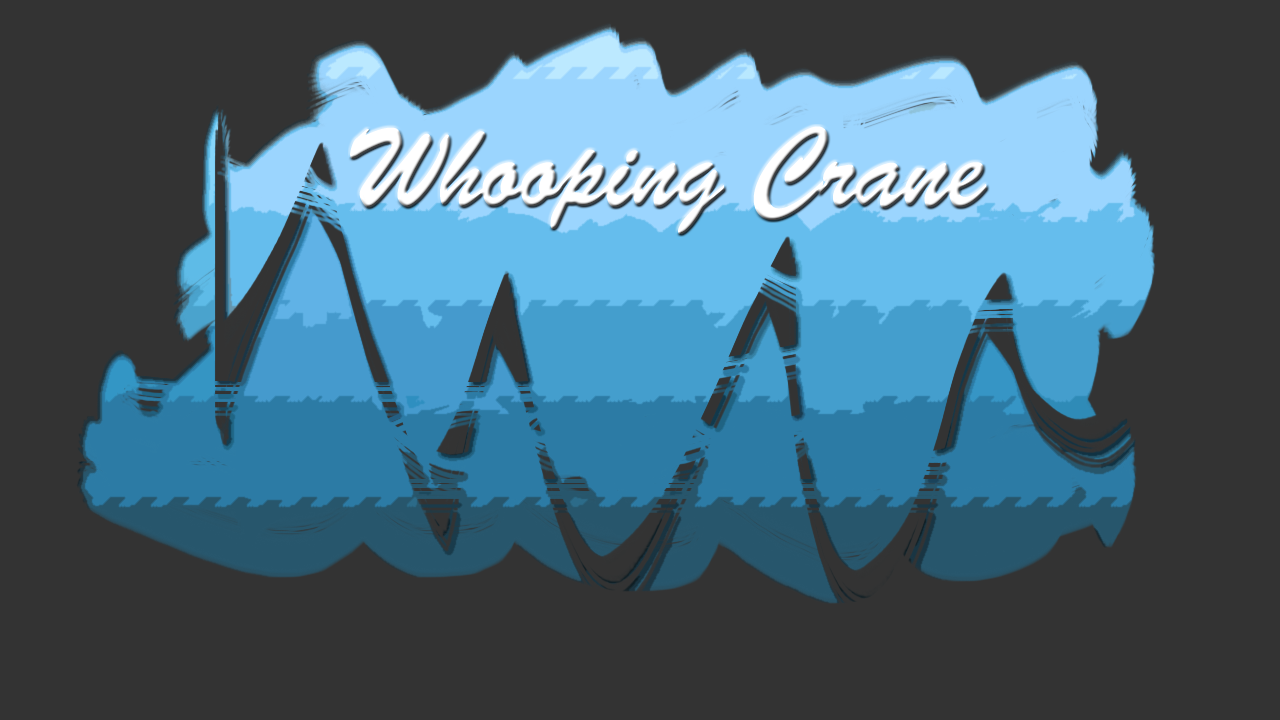
<style>
.page{position:relative;width:1280px;height:720px;background:#333333}
.page>*{position:absolute;margin:0}
.t1{font:113.2px "BrushScriptStd";letter-spacing:-0.01em;color:#ffffff;scale:0.88 1}
</style>
<div class="page">
<p class="t1" style="left:350px;top:126px;width:637px;height:108px">Whooping Crane</p>
</div>
